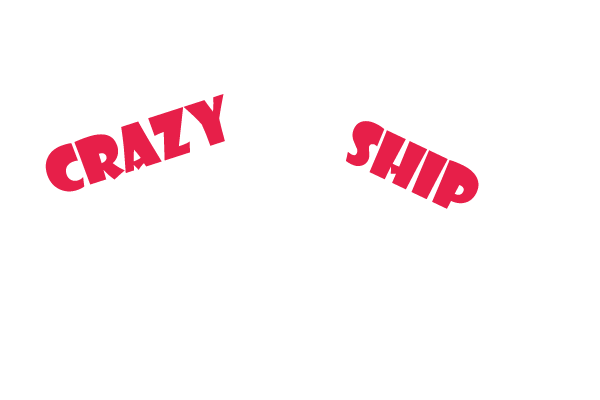
<style>
.page{position:relative;width:600px;height:400px;background:#ffffff}
.page>*{position:absolute;margin:0}
.t1{font:60px "ShowcardGothic-Reg";color:#e71f49}
.t2{font:48px "ShowcardGothic-Reg";color:#e71f49}
</style>
<div class="page">
<p class="t1" style="left:45px;top:94px;width:180px;height:98px;rotate:-18deg">Crazy</p>
<p class="t1" style="left:346px;top:121px;width:133px;height:88px;rotate:25deg"><span class="t2">     </span>Ship</p>
</div>
